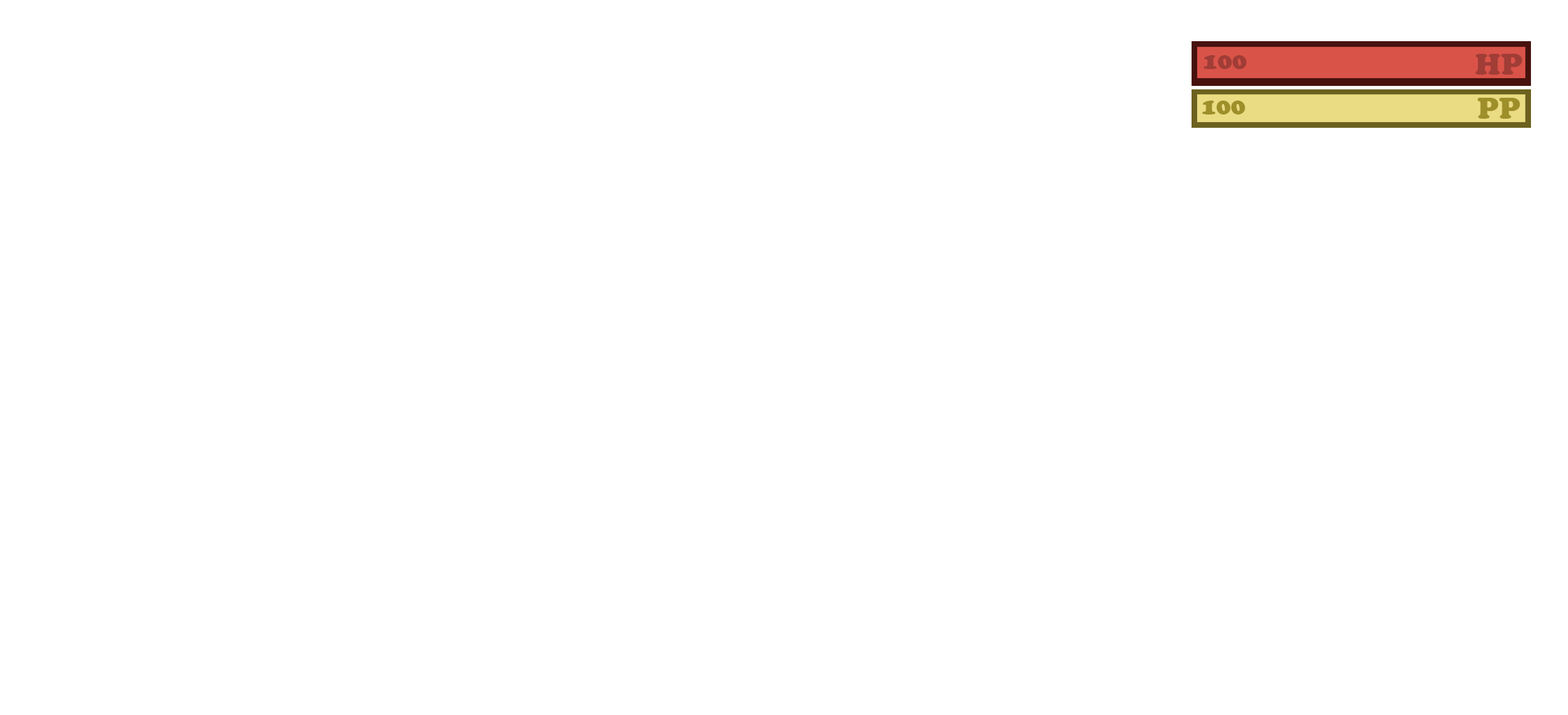
<style>
.page{position:relative;width:1568px;height:715px;background:#ffffff}
.page>*{position:absolute;margin:0}
.t1{font:31.4px "CooperBlack";color:#a03d36}
.t2{font:25.2px "CooperBlack";color:#a03d36}
.t3{font:25.2px "CooperBlack";color:#9f8f2a}
.t4{font:31.4px "CooperBlack";color:#9f8f2a}
</style>
<div class="page">
<p class="t1" style="left:1475px;top:54px;width:48px;height:21px">HP</p>
<p class="t2" style="left:1203px;top:55px;width:44px;height:14px">100</p>
<p class="t3" style="left:1202px;top:101px;width:43px;height:14px">100</p>
<p class="t4" style="left:1477px;top:98px;width:44px;height:21px">PP</p>
</div>
